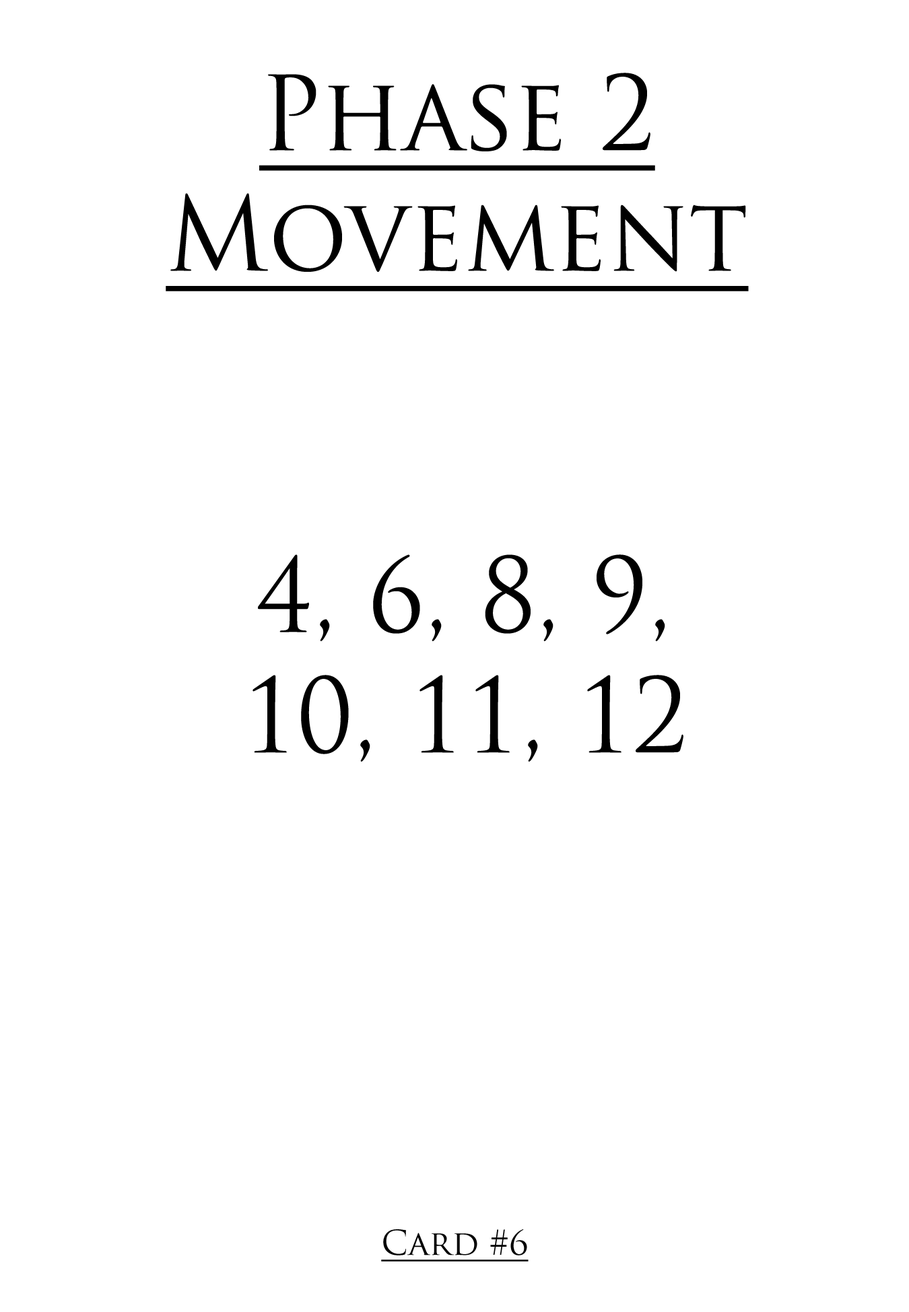
<style>
.page{position:relative;width:909px;height:1312px;background:#ffffff}
.page>*{position:absolute;margin:0}
.t1{font:100.6px "TrajanPro-Regular";color:#000000;text-decoration:underline;scale:0.97 1}
.t2{font:100.6px "TrajanPro-Regular";color:#000000;scale:0.97 1}
.t3{font:33.5px "TrajanPro-Regular";color:#000000;text-decoration:underline}
</style>
<div class="page">
<p class="t1" style="left:166px;top:73px;width:582px;height:218px;text-align:center">Phase 2<br>Movement</p>
<p class="t2" style="left:252px;top:555px;width:431px;height:207px;text-align:center">4, 6, 8, 9,<br>10, 11, 12</p>
<p class="t3" style="left:381px;top:1230px;width:147px;height:32px">Card #6</p>
</div>
